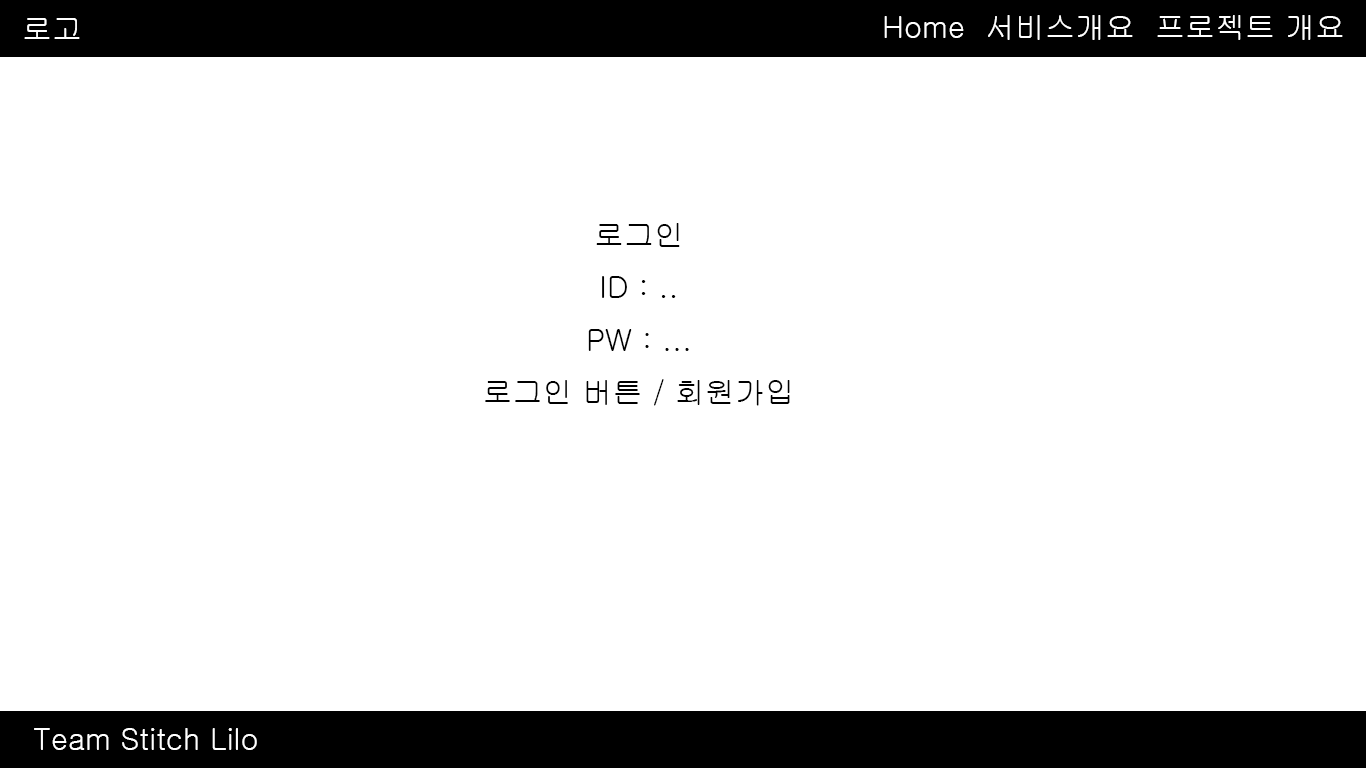
<style>
.page{position:relative;width:1366px;height:768px;background:#ffffff}
.page>*{position:absolute;margin:0}
.t1{font:30px "Gulim";color:#ffffff}
.t2{font:30px "Gulim";color:#000000}
</style>
<div class="page">
<p class="t1" style="left:884px;top:15px;width:459px;height:25px">Home  서비스개요  프로젝트 개요</p>
<p class="t1" style="left:24px;top:18px;width:56px;height:21px">로고</p>
<p class="t2" style="left:485px;top:223px;width:305px;height:183px;text-align:center">로그인<br>ID : ..<br>PW : ...<br>로그인 버튼 / 회원가입</p>
<p class="t1" style="left:34px;top:728px;width:223px;height:22px">Team Stitch Lilo</p>
</div>
